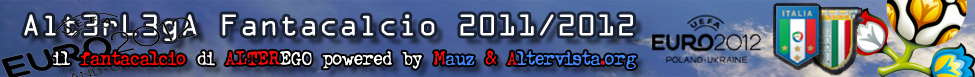
<style>
.page{position:relative;width:975px;height:77px}
.page>*{position:absolute;margin:0}
.t1{font:27px "OCRAStd";color:#ffffff}
.t2{font:21.8px "TypewriterOldstyle";color:#ffffff;scale:0.94 1}
.t3{font:21.8px "TypewriterOldstyle";color:#ff0000;scale:0.94 1}
.t4{font:21.8px "TypewriterOldstyle";color:#f60a0e;scale:0.94 1}
.t5{font:21.8px "TypewriterOldstyle";color:#4388ff;scale:0.94 1}
</style>
<div class="page">
<p class="t1" style="left:24px;top:14px;width:609px;height:27px">Alt3rL3gA Fantacalcio 2011/2012</p>
<p class="t2" style="left:53px;top:50px;width:584px;height:19px">il <span class="t3">fantacalcio</span> di <span class="t4">ALTER</span>EGO powered by <span class="t4">M</span><span class="t5">auz </span><span class="t4">&amp; A</span><span class="t5">ltervista</span><span class="t4">.</span><span class="t5">org</span></p>
</div>
